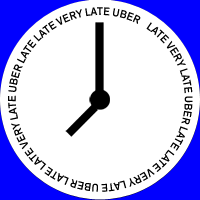
<style>
.page{position:relative;width:200px;height:200px;background:#ffffff}
.page>*{position:absolute;margin:0}
.t1{font:11.4px "Theinhardt-Medium";letter-spacing:0.005em;color:#000000;scale:0.95 1}
</style>
<div class="page">
<p class="t1" style="left:8px;top:7px;width:185px;height:185px">LATE VERY LATE UBER LATE LATE VERY LATE UBER LATE LATE VERY LATE UBER LATE LATE VERY LATE UBER LATE LATE VERY LATE UBER LATE LATEEEE VERY LATE UBER LATE LATE VERY LATE UBER LATE LATE VERY LATE UBER LATE LATE VERY LATE UBER LATE</p>
</div>
